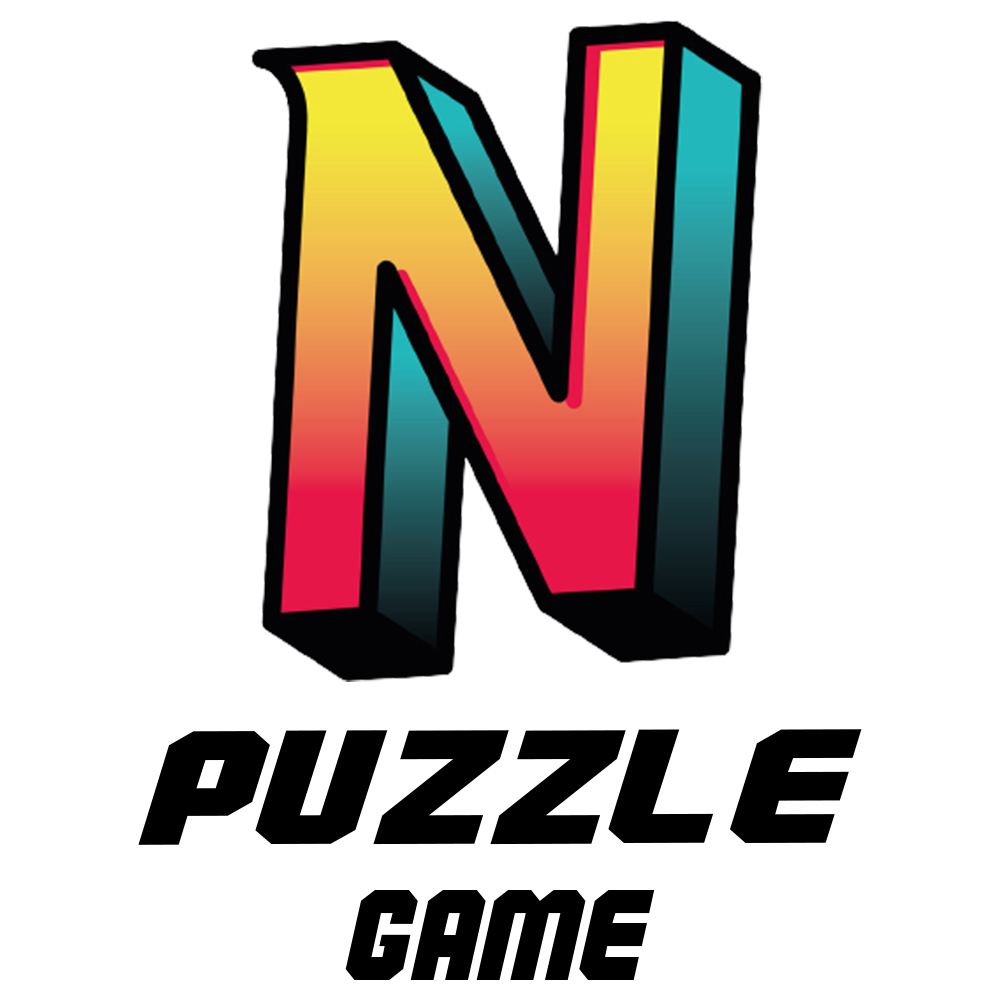
<style>
.page{position:relative;width:1000px;height:1000px;background:#ffffff}
.page>*{position:absolute;margin:0}
.t1{font:161.7px "Commando";color:#000000;scale:1.4 1}
.t2{font:128.6px "Commando";color:#000000}
</style>
<div class="page">
<p class="t1" style="left:138px;top:729px;width:724px;height:116px">PUZZLE</p>
<p class="t2" style="left:345px;top:890px;width:310px;height:90px">GAME</p>
</div>
